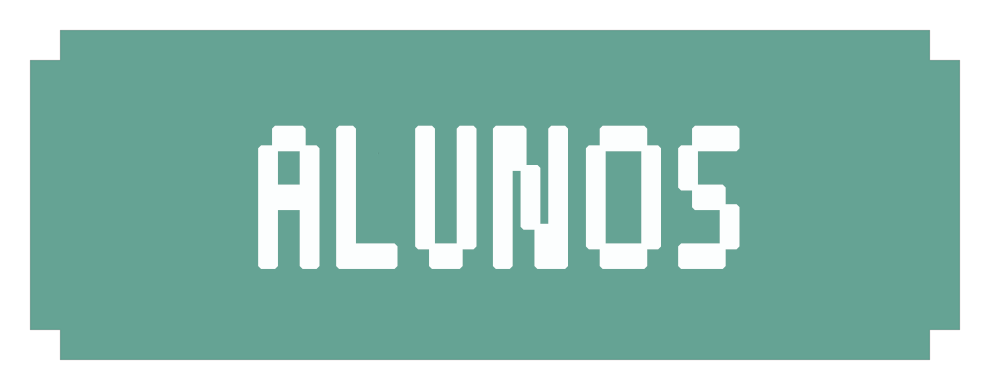
<style>
.page{position:relative;width:990px;height:390px;background:#65a394}
.page>*{position:absolute;margin:0}
.t1{font:255px "Pixelade";letter-spacing:0.025em;color:#fcfefe;font-weight:bold;scale:0.71 1}
</style>
<div class="page">
<p class="t1" style="left:258px;top:125px;width:482px;height:144px">ALUNOS</p>
</div>
